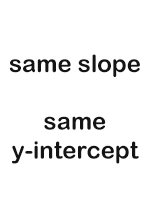
<style>
.page{position:relative;width:150px;height:210px;background:#ffffff}
.page>*{position:absolute;margin:0}
.t1{font:24px "ArialRoundedMTBold";color:#151414}
</style>
<div class="page">
<p class="t1" style="left:9px;top:54px;width:131px;height:110px;text-align:center">same slope<br><br>same<br>y-intercept</p>
</div>
